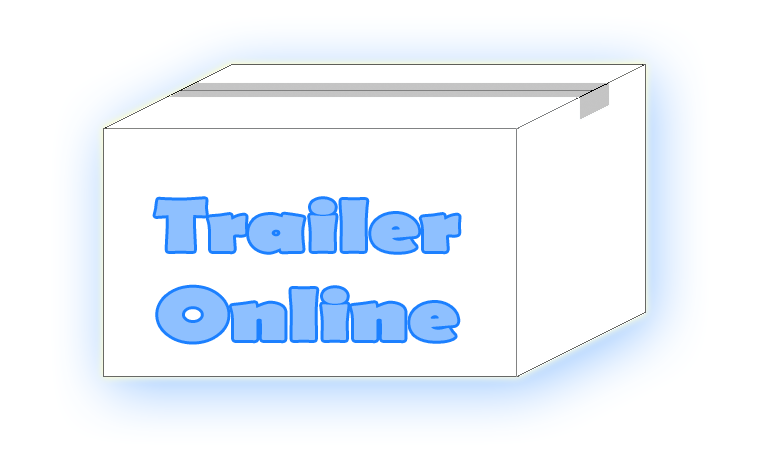
<style>
.page{position:relative;width:782px;height:466px;background:#ffffff}
.page>*{position:absolute;margin:0}
.t1{font:74px "BerlinSansFB-Bold";color:#8ec0ff;scale:1.29 1}
</style>
<div class="page">
<p class="t1" style="left:155px;top:199px;width:304px;height:143px;text-align:center">Trailer<br>Online</p>
</div>
